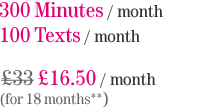
<style>
.page{position:relative;width:222px;height:108px;background:#ffffff}
.page>*{position:absolute;margin:0}
.t1{font:22px/25.3px "Tele-Antiqua";color:#e20074}
.t2{font:18px/25.3px "Tele-Antiqua";color:#333333}
.t3{font:18px "Tele-Antiqua";color:#333333}
.t4{font:22px "Tele-Antiqua";color:#666666}
.t5{font:22px "Tele-Antiqua";color:#e20074}
.t6{font:16px "Tele-Antiqua";color:#666666}
.t7{font:18px "Tele-Antiqua";color:#666666}
</style>
<div class="page">
<p class="t1" style="left:0px;top:2px;width:163px;height:43px">300 Minutes <span class="t2">/ month<br></span>100 Texts <span class="t2">/ month</span></p>
<p class="t3" style="left:1px;top:70px;width:155px;height:18px"><span class="t4">£33</span><span class="t5"> £16.50 </span>/ month</p>
<p class="t6" style="left:0px;top:91px;width:108px;height:17px">(for 18 months**<span class="t7">)</span></p>
</div>
